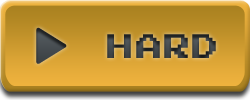
<style>
.page{position:relative;width:250px;height:100px}
.page>*{position:absolute;margin:0}
.t1{font:37px "Joystix";color:#3c4044}
</style>
<div class="page">
<p class="t1" style="left:107px;top:34px;width:109px;height:24px">HARD</p>
</div>
